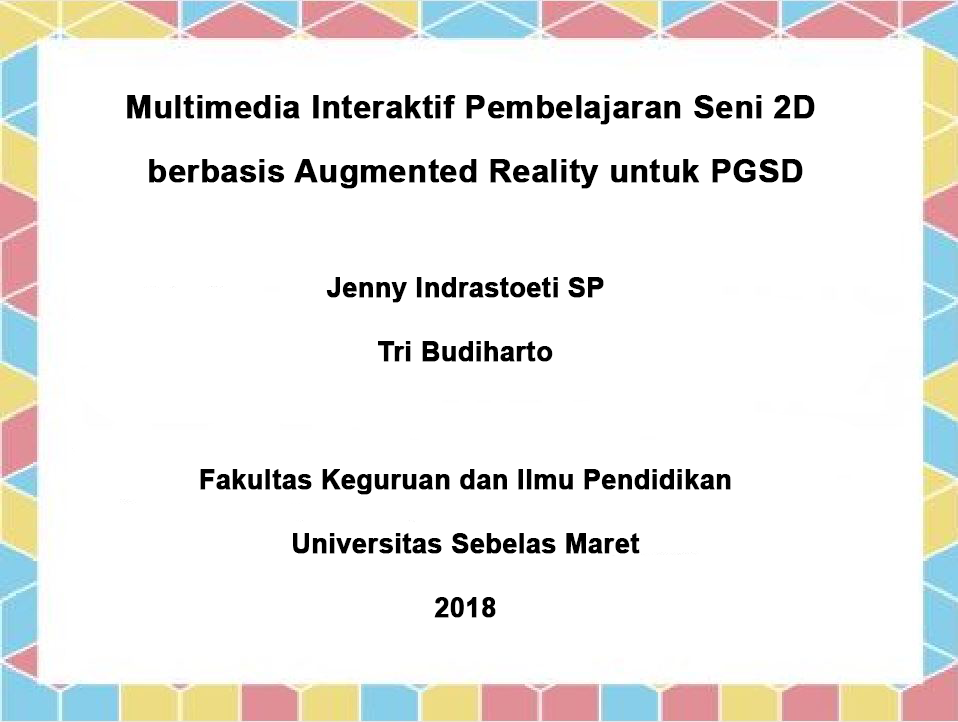
<style>
.page{position:relative;width:958px;height:722px;background:#ffffff}
.page>*{position:absolute;margin:0}
.t1{font:32px/64px "Arial-BoldMT";color:#000000;font-weight:bold}
.t2{font:26.7px/64px "Arial-BoldMT";color:#000000;font-weight:bold}
</style>
<div class="page">
<p class="t1" style="left:127px;top:95px;width:688px;height:94px;text-align:center">Multimedia Interaktif Pembelajaran Seni 2D <br>berbasis Augmented Reality untuk PGSD</p>
<p class="t2" style="left:200px;top:277px;width:531px;height:341px;text-align:center">Jenny Indrastoeti SP<br>Tri Budiharto<br><br>Fakultas Keguruan dan Ilmu Pendidikan<br>Universitas Sebelas Maret<br>2018</p>
</div>
